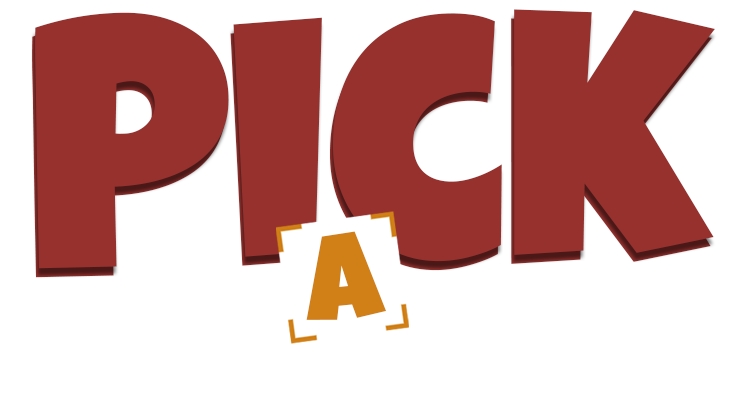
<style>
.page{position:relative;width:739px;height:396px;background:#ffffff}
.page>*{position:absolute;margin:0}
.t1{font:350.8px "LuckiestGuy-Regular";color:#96312e}
.t2{font:124.8px "LuckiestGuy-Regular";color:#d08016}
</style>
<div class="page">
<p class="t1" style="left:35px;top:9px;width:680px;height:260px;rotate:-1deg">Pick</p>
<p class="t1" style="left:32px;top:18px;width:680px;height:260px;rotate:-1deg">Pick</p>
<p class="t2" style="left:306px;top:231px;width:80px;height:89px;rotate:-6deg">A</p>
</div>
